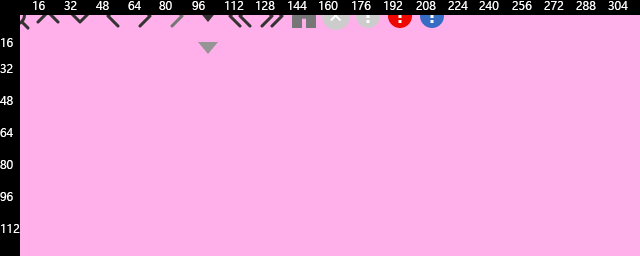
<style>
.page{position:relative;width:640px;height:256px;background:#ffafea}
.page>*{position:absolute;margin:0}
.t1{font:12px "MalgunGothic";color:#ffffff}
</style>
<div class="page">
<p class="t1" style="left:33px;top:1px;width:12px;height:9px">16</p>
<p class="t1" style="left:64px;top:1px;width:13px;height:9px">32</p>
<p class="t1" style="left:96px;top:1px;width:13px;height:9px">48</p>
<p class="t1" style="left:128px;top:1px;width:13px;height:9px">64</p>
<p class="t1" style="left:159px;top:1px;width:13px;height:9px">80</p>
<p class="t1" style="left:192px;top:1px;width:13px;height:9px">96</p>
<p class="t1" style="left:225px;top:1px;width:19px;height:9px">112</p>
<p class="t1" style="left:256px;top:1px;width:19px;height:9px">128</p>
<p class="t1" style="left:288px;top:1px;width:19px;height:9px">144</p>
<p class="t1" style="left:319px;top:1px;width:19px;height:9px">160</p>
<p class="t1" style="left:352px;top:1px;width:19px;height:9px">176</p>
<p class="t1" style="left:384px;top:1px;width:19px;height:9px">192</p>
<p class="t1" style="left:416px;top:1px;width:20px;height:9px">208</p>
<p class="t1" style="left:448px;top:1px;width:20px;height:9px">224</p>
<p class="t1" style="left:479px;top:1px;width:20px;height:9px">240</p>
<p class="t1" style="left:512px;top:1px;width:20px;height:9px">256</p>
<p class="t1" style="left:544px;top:1px;width:20px;height:9px">272</p>
<p class="t1" style="left:576px;top:1px;width:20px;height:9px">288</p>
<p class="t1" style="left:608px;top:1px;width:20px;height:9px">304</p>
<p class="t1" style="left:1px;top:38px;width:12px;height:9px">16</p>
<p class="t1" style="left:0px;top:64px;width:13px;height:9px">32</p>
<p class="t1" style="left:0px;top:96px;width:13px;height:9px">48</p>
<p class="t1" style="left:0px;top:128px;width:13px;height:9px">64</p>
<p class="t1" style="left:0px;top:160px;width:13px;height:9px">80</p>
<p class="t1" style="left:0px;top:192px;width:13px;height:9px">96</p>
<p class="t1" style="left:1px;top:224px;width:19px;height:9px">112</p>
</div>
